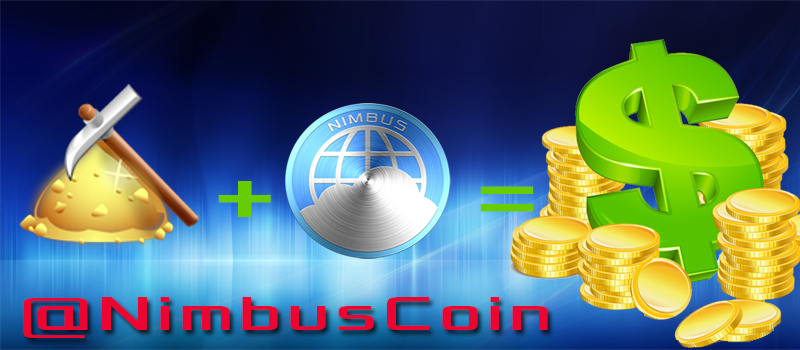
<style>
.page{position:relative;width:800px;height:350px}
.page>*{position:absolute;margin:0}
.t1{font:75px "Xolonium";letter-spacing:0.1em;color:#68cc02;scale:1.2 1}
.t2{font:50px "Xolonium";letter-spacing:0.1em;color:#ec0631;scale:1.2 1}
</style>
<div class="page">
<p class="t1" style="left:218px;top:181px;width:53px;height:36px">+</p>
<p class="t1" style="left:480px;top:186px;width:53px;height:26px">=</p>
<p class="t2" style="left:23px;top:297px;width:525px;height:41px">@NimbusCoin</p>
</div>
